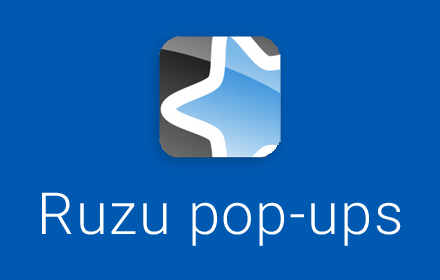
<style>
.page{position:relative;width:440px;height:280px;background:#0059b1}
.page>*{position:absolute;margin:0}
.t1{font:58px "Roboto-Light";letter-spacing:0.025em;color:#ffffff}
</style>
<div class="page">
<p class="t1" style="left:42px;top:192px;width:359px;height:54px">Ruzu pop-ups</p>
</div>
